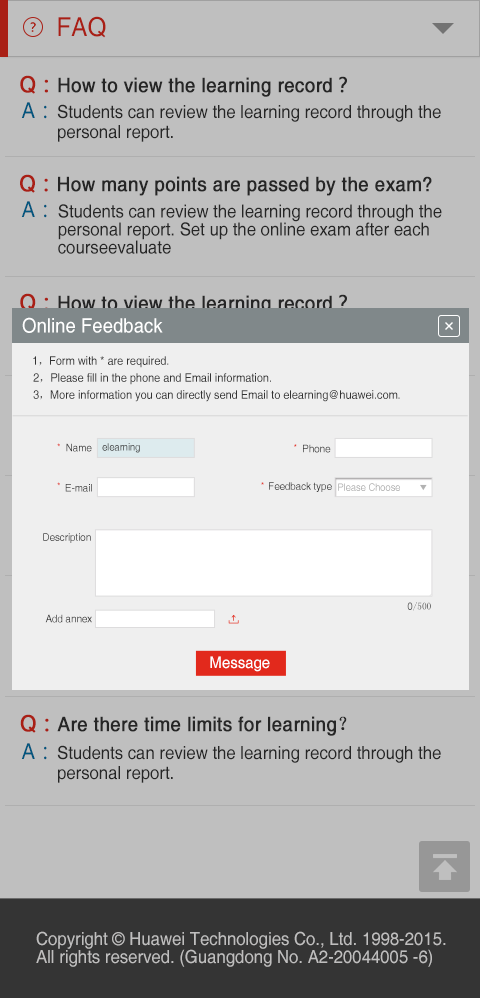
<style>
.page{position:relative;width:480px;height:998px;background:#bfbfbf}
.page>*{position:absolute;margin:0}
.t1{font:26px "Helvetica";color:#a91f15;scale:0.93 1}
.t2{font:20px "Helvetica";color:#333333;font-weight:bold;scale:0.93 1}
.t3{font:22px "Helvetica";color:#e2291c;font-weight:bold;scale:0.93 1}
.t4{font:22px "MicrosoftYaHei";color:#e2291c;font-weight:bold;scale:0.93 1}
.t5{font:20px "MicrosoftYaHei";color:#333333;font-weight:bold;scale:0.93 1}
.t6{font:22px "Helvetica";color:#02567e;scale:0.93 1}
.t7{font:22px "MicrosoftYaHei";color:#02567e;scale:0.93 1}
.t8{font:18px/20px "Helvetica";color:#333333;scale:0.93 1}
.t9{font:18px/18px "Helvetica";color:#333333;scale:0.93 1}
.t10{font:20px "Helvetica";color:#ffffff;scale:0.93 1}
.t11{font:11.8px "Helvetica";color:#333333;scale:0.93 1}
.t12{font:11.8px "SimSun";color:#333333;scale:0.93 1}
.t13{font:9.1px "Helvetica";scale:0.93 1}
.t14{font:10.4px "Helvetica";color:#333333;scale:0.93 1}
.t15{font:10px "Helvetica";scale:0.93 1}
.t16{font:10.4px "Helvetica";scale:0.93 1}
.t17{font:10px "SimSun";scale:0.93 1}
.t18{font:16px "Helvetica";color:#ffffff;scale:0.93 1}
.t19{font:20px "SimSun";color:#333333;font-weight:bold;scale:0.93 1}
.t20{font:18px/18px "Helvetica";color:#bfbebe;scale:0.93 1}
</style>
<div class="page">
<p class="t1" style="left:58px;top:16px;width:48px;height:22px">FAQ</p>
<p class="t2" style="left:20px;top:75px;width:327px;height:22px"><span class="t3">Q</span><span class="t4">：</span>How to view the learning record<span class="t5">？</span></p>
<p class="t6" style="left:21px;top:102px;width:26px;height:17px">A<span class="t7">：</span></p>
<p class="t8" style="left:57px;top:104px;width:384px;height:38px">Students can review the learning record through the <br>personal report.</p>
<p class="t2" style="left:20px;top:174px;width:412px;height:22px"><span class="t3">Q</span><span class="t4">：</span>How many points are passed by the exam?</p>
<p class="t6" style="left:21px;top:201px;width:26px;height:17px">A<span class="t7">：</span></p>
<p class="t9" style="left:58px;top:204px;width:384px;height:50px">Students can review the learning record through the <br>personal report. Set up the online exam after each <br>courseevaluate</p>
<p class="t2" style="left:20px;top:293px;width:327px;height:22px"><span class="t3">Q</span><span class="t4">：</span>How to view the learning record<span class="t5">？</span></p>
<p class="t10" style="left:22px;top:317px;width:141px;height:16px">Online Feedback</p>
<p class="t11" style="left:33px;top:356px;width:136px;height:12px">1<span class="t12">，</span>Form with * are required.</p>
<p class="t11" style="left:33px;top:373px;width:238px;height:12px">2<span class="t12">，</span>Please fill in the phone and Email information.</p>
<p class="t11" style="left:33px;top:390px;width:367px;height:12px">3<span class="t12">，</span>More information you can directly send Email to elearning@huawei.com.</p>
<p class="t13" style="left:57px;top:443px;width:3px;height:4px">*</p>
<p class="t14" style="left:66px;top:443px;width:26px;height:9px">Name</p>
<p class="t15" style="left:102px;top:443px;width:38px;height:10px">elearning</p>
<p class="t13" style="left:294px;top:444px;width:3px;height:3px">*</p>
<p class="t16" style="left:303px;top:444px;width:28px;height:9px">Phone</p>
<p class="t13" style="left:57px;top:482px;width:3px;height:4px">*</p>
<p class="t14" style="left:65px;top:484px;width:27px;height:8px">E-mail</p>
<p class="t13" style="left:261px;top:482px;width:3px;height:3px">*</p>
<p class="t14" style="left:269px;top:482px;width:63px;height:10px">Feedback type</p>
<p class="t15" style="left:338px;top:483px;width:62px;height:8px">Please Choose</p>
<p class="t16" style="left:43px;top:533px;width:48px;height:10px">Description</p>
<p class="t17" style="left:407px;top:602px;width:24px;height:9px"><span class="t15">0</span>/500</p>
<p class="t14" style="left:45px;top:614px;width:47px;height:9px">Add annex</p>
<p class="t18" style="left:210px;top:656px;width:60px;height:16px">Message</p>
<p class="t2" style="left:20px;top:714px;width:327px;height:22px"><span class="t3">Q</span><span class="t4">：</span>Are there time limits for learning<span class="t19">？</span></p>
<p class="t6" style="left:21px;top:743px;width:26px;height:17px">A<span class="t7">：</span></p>
<p class="t8" style="left:57px;top:745px;width:384px;height:38px">Students can review the learning record through the <br>personal report.</p>
<p class="t20" style="left:36px;top:931px;width:410px;height:36px">Copyright © Huawei Technologies Co., Ltd. 1998-2015. <br>All rights reserved. (Guangdong No. A2-20044005 -6)</p>
</div>
